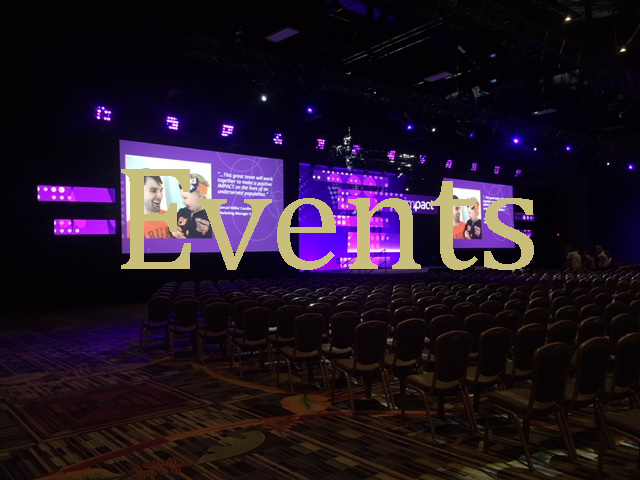
<style>
.page{position:relative;width:640px;height:480px}
.page>*{position:absolute;margin:0}
.t1{font:150px "Cambria";color:#cabe7c}
</style>
<div class="page">
<p class="t1" style="left:121px;top:169px;width:413px;height:101px">Events</p>
</div>
